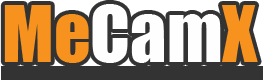
<style>
.page{position:relative;width:263px;height:80px;background:#333333}
.page>*{position:absolute;margin:0}
.t1{font:72px "Impact";color:#fefefe}
.t2{font:72px "Impact";color:#f7921e}
</style>
<div class="page">
<p class="t1" style="left:4px;top:4px;width:254px;height:59px"><span class="t2">Me</span>Cam<span class="t2">X</span></p>
</div>
